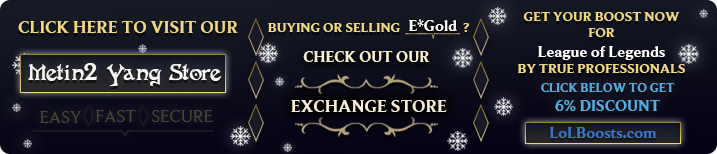
<style>
.page{position:relative;width:717px;height:154px}
.page>*{position:absolute;margin:0}
.t1{font:14px "BeaufortforLOL-Bold";color:#efd885}
.t2{font:16px "BeaufortforLOL-Bold";color:#ffffff}
.t3{font:18px "BeaufortforLOL-Bold";color:#efd885}
.t4{font:16px "BeaufortforLOL-Bold";color:#fefefe}
.t5{font:16px "BeaufortforLOL-Bold";color:#f6edd3}
.t6{font:25.2px "FantaisieArtistique";color:#f9f8f4}
.t7{font:25.2px "FantaisieArtistique";letter-spacing:0.02em;color:#f9f8f4}
.t8{font:25.2px "BeaufortforLOL-Bold";letter-spacing:0.02em;color:#f9f8f4}
.t9{font:13px "BeaufortforLOL-Bold";color:#54abdd}
.t10{font:16px "BeaufortforLOL-Bold";color:#54abdd}
.t11{font:18px "BeaufortforLOL-Bold";color:#f6edd3}
.t12{font:18px "BeaufortforLOL-Regular";color:#4a4232}
.t13{font:18px "BeaufortforLOL-Regular";color:#4a4332}
.t14{font:16px "BeaufortforLOL-Bold";color:#3e75c9}
</style>
<div class="page">
<p class="t1" style="left:518px;top:12px;width:167px;height:61px;text-align:center">GET YOUR BOOST NOW<br>FOR<br><span class="t2">League of Legends<br></span>BY TRUE PROFESSIONALS</p>
<p class="t3" style="left:18px;top:21px;width:220px;height:12px">CLICK HERE TO VISIT OUR</p>
<p class="t1" style="left:268px;top:23px;width:201px;height:9px">BUYING OR SELLING                     ?</p>
<p class="t4" style="left:409px;top:19px;width:48px;height:12px">E*Gold</p>
<p class="t5" style="left:303px;top:51px;width:127px;height:11px">CHECK OUT OUR</p>
<p class="t6" style="left:28px;top:63px;width:193px;height:23px"><span class="t7">Metin</span><span class="t8">2 </span>Yang Store</p>
<p class="t9" style="left:541px;top:83px;width:134px;height:28px;text-align:center">CLICK BELOW TO GET<br><span class="t10">6% DISCOUNT</span></p>
<p class="t11" style="left:291px;top:100px;width:156px;height:12px">EXCHANGE STORE</p>
<p class="t12" style="left:40px;top:111px;width:41px;height:12px">EASY</p>
<p class="t13" style="left:96px;top:110px;width:40px;height:12px">FAST</p>
<p class="t12" style="left:152px;top:110px;width:61px;height:12px">SECURE</p>
<p class="t14" style="left:550px;top:127px;width:107px;height:11px">LoLBoosts.com</p>
</div>
